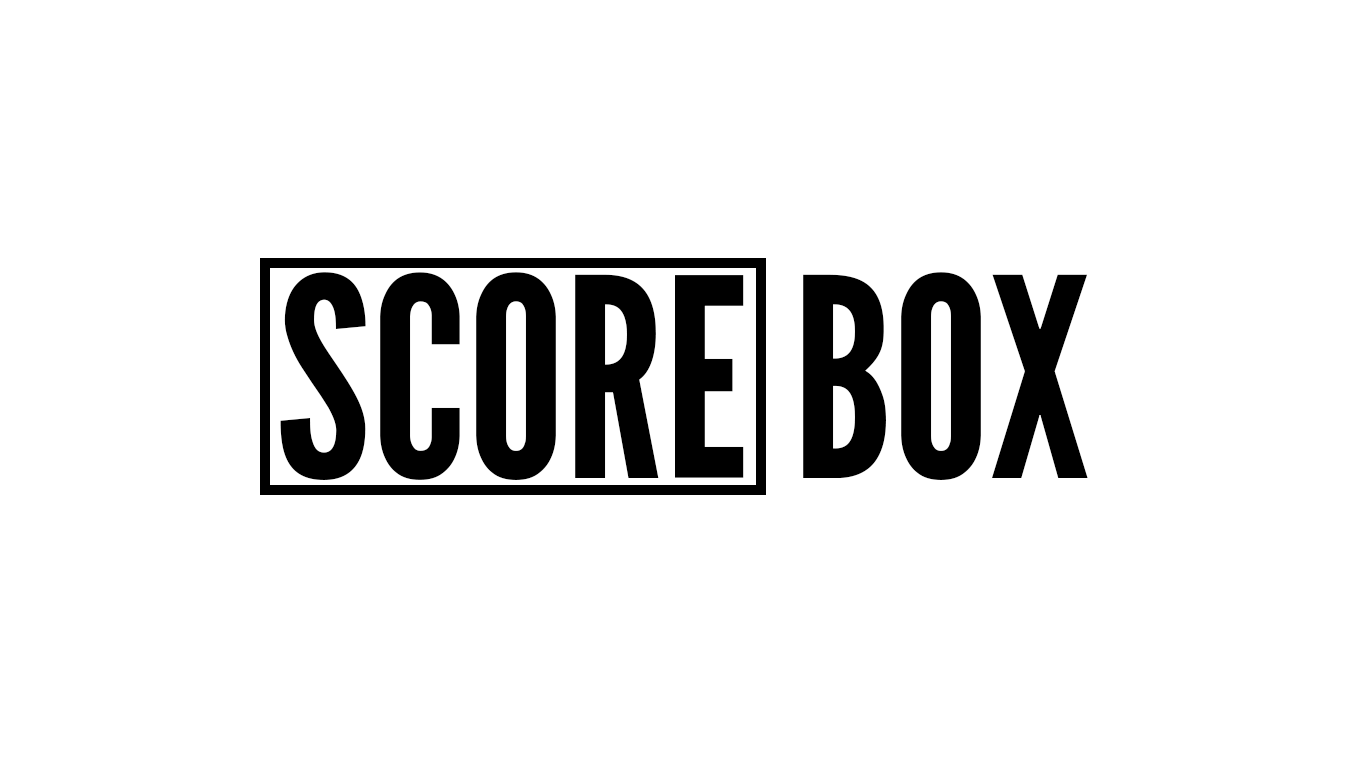
<style>
.page{position:relative;width:1366px;height:768px;background:#ffffff}
.page>*{position:absolute;margin:0}
.t1{font:276.5px "LeagueGothic-Regular";color:#000000}
</style>
<div class="page">
<p class="t1" style="left:280px;top:272px;width:808px;height:208px">SCORE BOX</p>
</div>
